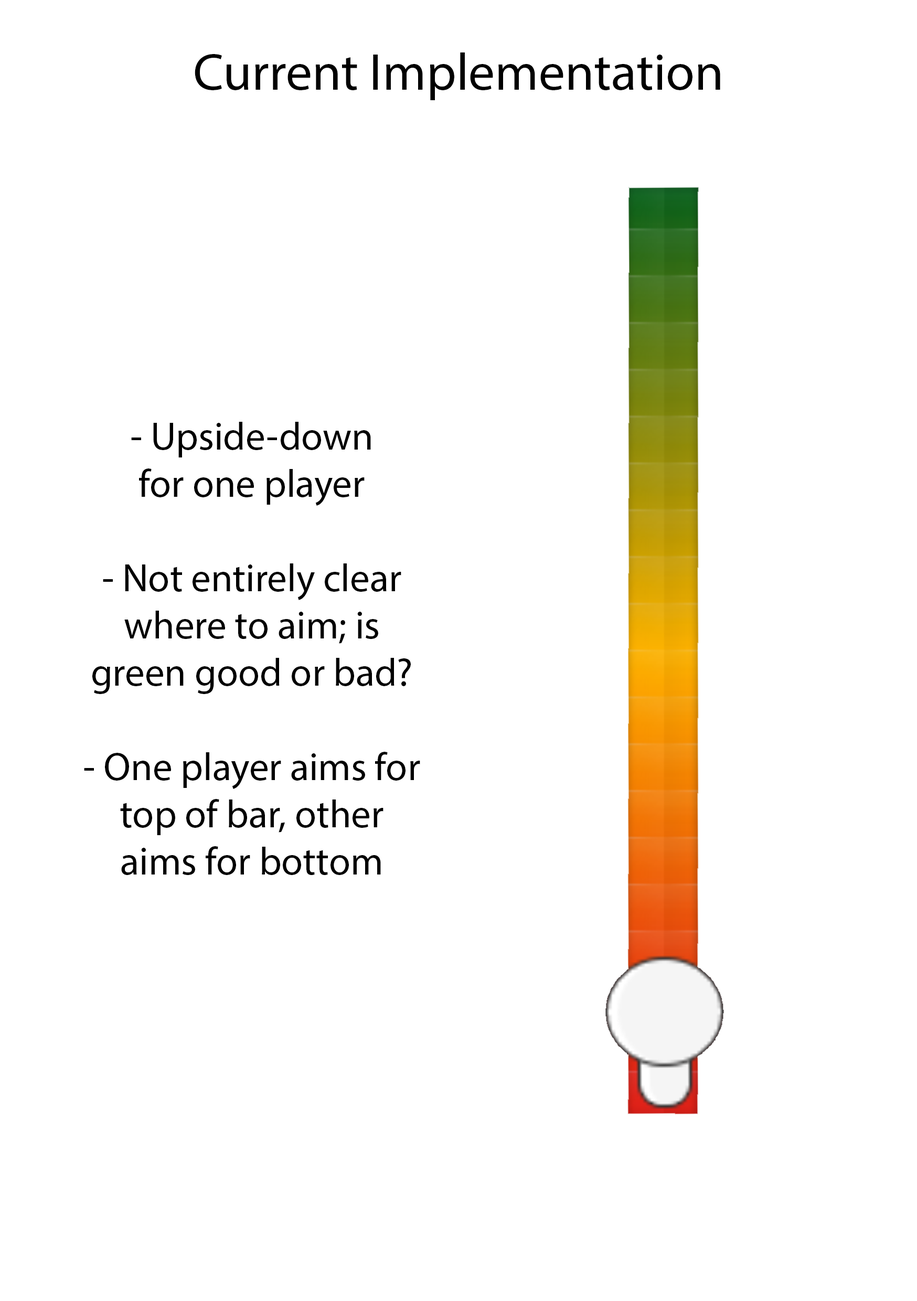
<style>
.page{position:relative;width:917px;height:1301px;background:#ffffff}
.page>*{position:absolute;margin:0}
.t1{font:52.4px "MyriadPro-Regular";color:#000000}
.t2{font:39.3px "MyriadPro-Regular";color:#000000}
</style>
<div class="page">
<p class="t1" style="left:195px;top:52px;width:525px;height:48px">Current Implementation</p>
<p class="t2" style="left:84px;top:422px;width:336px;height:453px;text-align:center">- Upside-down<br>for one player<br><br>- Not entirely clear<br>where to aim; is<br>green good or bad?<br><br>- One player aims for<br>top of bar, other<br>aims for bottom</p>
</div>
